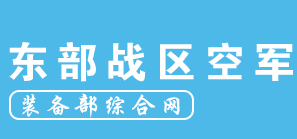
<style>
.page{position:relative;width:297px;height:139px;background:#4cb9e9}
.page>*{position:absolute;margin:0}
.t1{font:42.5px "FZDHTJW--GB1-0";letter-spacing:0.16em;color:#ffffff;text-transform:uppercase}
.t2{font:24.6px "FZXKJW--GB1-0";letter-spacing:0.16em;color:#ffffff;text-transform:uppercase}
</style>
<div class="page">
<p class="t1" style="left:9px;top:42px;width:284px;height:40px">东部战区空军</p>
<p class="t2" style="left:22px;top:93px;width:158px;height:25px">装备部综合网</p>
</div>
